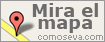
<style>
.page{position:relative;width:105px;height:42px;background:#f2efe9}
.page>*{position:absolute;margin:0}
.t1{font:18px/12px "Verdana-Bold";color:#6c6c6c}
.t2{font:9px "Small Fonts";color:#999999}
</style>
<div class="page">
<p class="t1" style="left:32px;top:3px;width:66px;height:30px;text-align:center">Mira el<br>mapa</p>
<p class="t2" style="left:38px;top:35px;width:65px;height:5px">comoseva.com</p>
</div>
